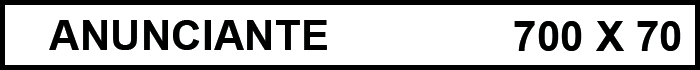
<style>
.page{position:relative;width:700px;height:70px;background:#ffffff}
.page>*{position:absolute;margin:0}
.t1{font:42.3px "Arial-BoldMT";color:#000000}
</style>
<div class="page">
<p class="t1" style="left:49px;top:20px;width:278px;height:30px">ANUNCIANTE</p>
<p class="t1" style="left:514px;top:21px;width:167px;height:30px">700 X 70</p>
</div>
